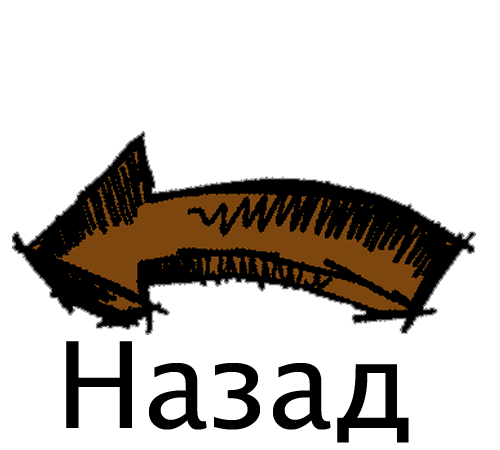
<style>
.page{position:relative;width:500px;height:450px;background:#ffffff}
.page>*{position:absolute;margin:0}
.t1{font:120px "LucidaSansUnicode";color:#000000}
</style>
<div class="page">
<p class="t1" style="left:66px;top:341px;width:343px;height:102px">Назад</p>
</div>
